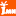
<style>
.page{position:relative;width:16px;height:16px;background:#fa5901}
.page>*{position:absolute;margin:0}
.t1{font:14px "ARHERMANN";color:#ffffff;font-weight:bold}
.t2{font:8px "ARDELANEY";color:#ffffff;font-weight:bold}
</style>
<div class="page">
<p class="t1" style="left:0px;top:1px;width:8px;height:14px">I</p>
<p class="t2" style="left:5px;top:9px;width:11px;height:5px">mn</p>
</div>
